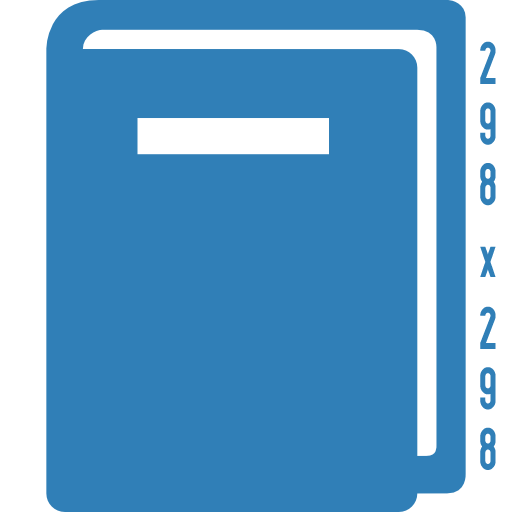
<style>
.page{position:relative;width:512px;height:512px;background:#307fb7}
.page>*{position:absolute;margin:0}
.t1{font:51.3px "OSP-DIN";color:#307fb7;scale:1.18 1}
</style>
<div class="page">
<p class="t1" style="left:480px;top:41px;width:16px;height:429px;text-align:center">298 x 298</p>
</div>
